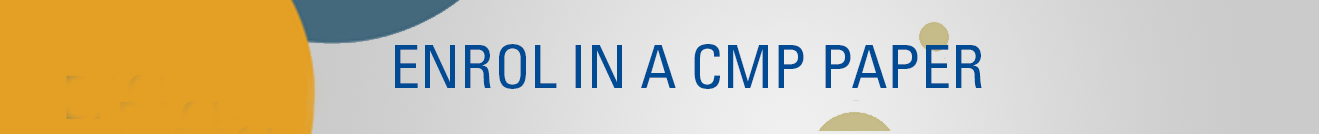
<style>
.page{position:relative;width:1319px;height:134px;background:#e4a025}
.page>*{position:absolute;margin:0}
.t1{font:60px "UniversLTStd-Cn";color:#004b94}
</style>
<div class="page">
<p class="t1" style="left:395px;top:44px;width:587px;height:45px">ENROL IN A CMP PAPER</p>
</div>
